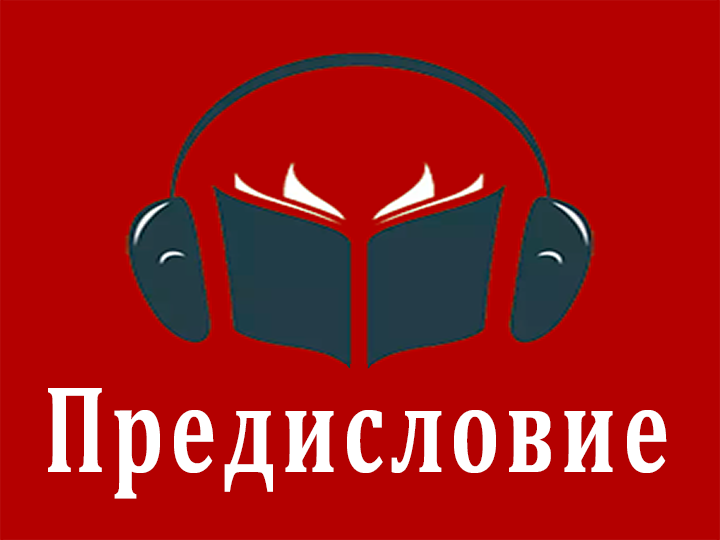
<style>
.page{position:relative;width:720px;height:540px;background:#b40000}
.page>*{position:absolute;margin:0}
.t1{font:125.9px "Cambria-Bold";letter-spacing:0.075em;color:#ffffff;scale:0.69 1}
</style>
<div class="page">
<p class="t1" style="left:48px;top:388px;width:619px;height:111px">Предисловие</p>
</div>
